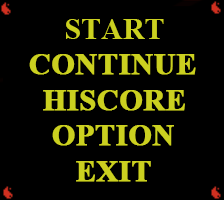
<style>
.page{position:relative;width:224px;height:200px;background:#000000}
.page>*{position:absolute;margin:0}
.t1{font:30px "TimesNewRomanPS-BoldMT";color:#cbd020}
.t2{font:30px "TimesNewRomanPS-BoldMT";color:#cbd020;font-weight:bold}
</style>
<div class="page">
<p class="t1" style="left:66px;top:19px;width:98px;height:20px">START</p>
<p class="t2" style="left:29px;top:54px;width:167px;height:21px">CONTINUE</p>
<p class="t2" style="left:43px;top:90px;width:142px;height:21px">HISCORE</p>
<p class="t2" style="left:52px;top:125px;width:122px;height:21px">OPTION</p>
<p class="t2" style="left:76px;top:161px;width:75px;height:21px">EXIT</p>
</div>
